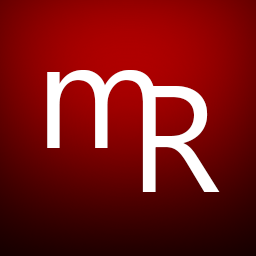
<style>
.page{position:relative;width:256px;height:256px}
.page>*{position:absolute;margin:0}
.t1{font:152px "SegoeUI";color:#ffffff}
</style>
<div class="page">
<p class="t1" style="left:47px;top:70px;width:109px;height:78px">m</p>
<p class="t1" style="left:142px;top:86px;width:78px;height:106px">R</p>
</div>
